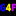
<style>
.page{position:relative;width:16px;height:16px;background:#000000}
.page>*{position:absolute;margin:0}
.t1{font:11px "Tajawal-Bold";color:#1200fb;scale:0.89 1}
.t2{font:11px "Tajawal-Bold";color:#f8fb00;scale:0.89 1}
.t3{font:11px "Tajawal-Bold";color:#c900fb;scale:0.89 1}
</style>
<div class="page">
<p class="t1" style="left:0px;top:3px;width:17px;height:9px">G<span class="t2">4</span><span class="t3">F</span></p>
</div>
